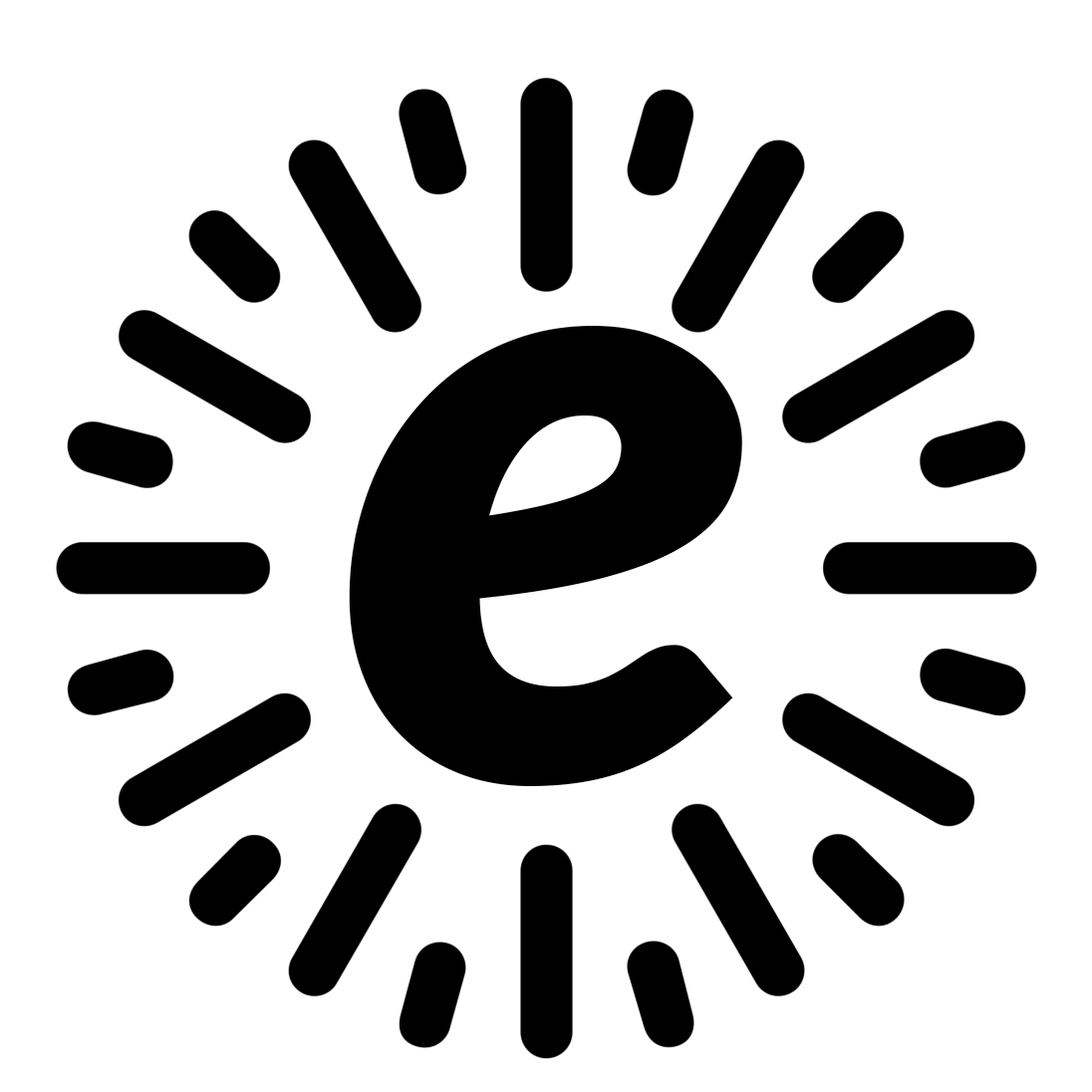
<style>
.page{position:relative;width:1092px;height:1092px;background:#ffffff}
.page>*{position:absolute;margin:0}
.t1{font:862.9px "Lato-BlackItalic";color:#000000}
</style>
<div class="page">
<p class="t1" style="left:349px;top:326px;width:393px;height:460px">e</p>
</div>
